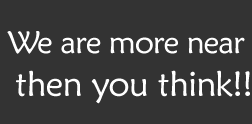
<style>
.page{position:relative;width:252px;height:124px;background:#333333}
.page>*{position:absolute;margin:0}
.t1{font:31.6px "MaiandraGD-Regular";letter-spacing:-0.025em;color:#ffffff}
.t2{font:35.2px "MaiandraGD-Regular";letter-spacing:-0.025em;color:#ffffff}
</style>
<div class="page">
<p class="t1" style="left:7px;top:31px;width:238px;height:23px">We are more near</p>
<p class="t2" style="left:16px;top:70px;width:234px;height:34px">then you think!!</p>
</div>
